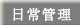
<style>
.page{position:relative;width:80px;height:25px;background:#7d7d7d}
.page>*{position:absolute;margin:0}
.t1{font:14px "NSimSun";letter-spacing:0.1em;color:#ffffff;font-weight:bold}
</style>
<div class="page">
<p class="t1" style="left:13px;top:7px;width:59px;height:15px">日常管理</p>
</div>
